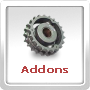
<style>
.page{position:relative;width:90px;height:90px;background:#ffffff}
.page>*{position:absolute;margin:0}
.t1{font:10.3px "Tahoma";letter-spacing:0.025em;color:#b64444;font-weight:bold;scale:1.16 1}
</style>
<div class="page">
<p class="t1" style="left:21px;top:65px;width:47px;height:8px">Addons</p>
</div>
